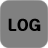
<style>
.page{position:relative;width:48px;height:48px;background:#808080}
.page>*{position:absolute;margin:0}
.t1{font:14px "HeadlineR-HM";color:#010000}
</style>
<div class="page">
<p class="t1" style="left:8px;top:18px;width:33px;height:13px">LOG</p>
</div>
